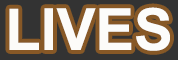
<style>
.page{position:relative;width:178px;height:60px;background:#333333}
.page>*{position:absolute;margin:0}
.t1{font:58px "Arial-BoldMT";color:#ffffff}
</style>
<div class="page">
<p class="t1" style="left:9px;top:7px;width:161px;height:44px">LIVES</p>
</div>
